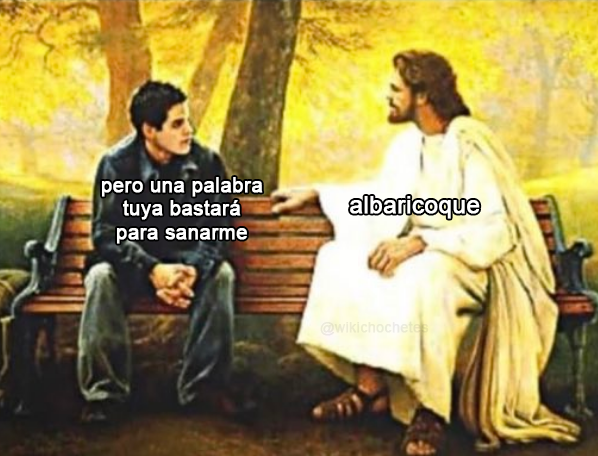
<style>
.page{position:relative;width:598px;height:456px}
.page>*{position:absolute;margin:0}
.t1{font:20.3px "ArialMT";color:#ffffff;font-weight:bold}
.t2{font:23.9px "ArialMT";color:#ffffff;font-weight:bold}
.t3{font:14.3px "ArialMT";color:#ecebd3;font-weight:bold}
</style>
<div class="page">
<p class="t1" style="left:102px;top:177px;width:161px;height:67px;text-align:center">pero una palabra<br>tuya bastará<br>para sanarme</p>
<p class="t2" style="left:350px;top:196px;width:130px;height:23px">albaricoque</p>
<p class="t3" style="left:320px;top:321px;width:109px;height:15px">@wikichochetes</p>
</div>
